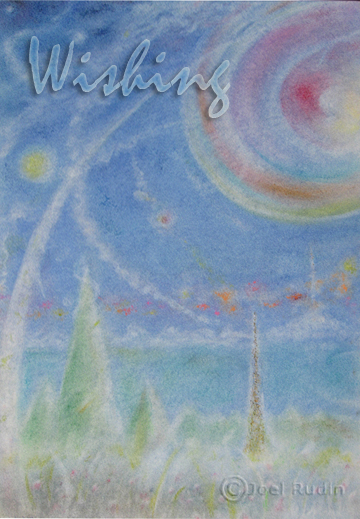
<style>
.page{position:relative;width:360px;height:519px}
.page>*{position:absolute;margin:0}
.t1{font:80px "Mistral"}
</style>
<div class="page">
<p class="t1" style="left:29px;top:36px;width:202px;height:82px">Wishing</p>
</div>
